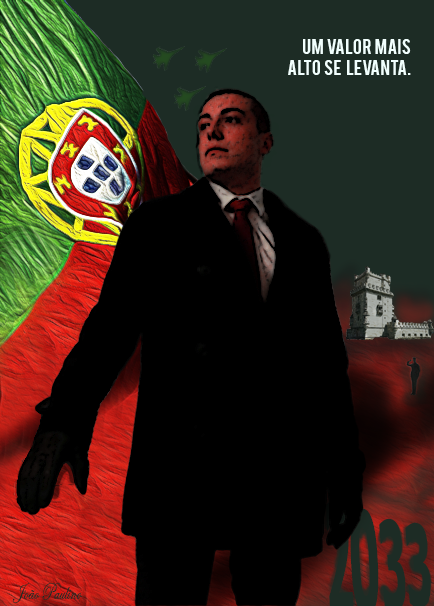
<style>
.page{position:relative;width:434px;height:606px;background:#000000}
.page>*{position:absolute;margin:0}
.t1{font:17.1px "Bebas";color:#f1fffd}
.t2{font:111.6px "Tahoma-Bold";color:#1d2c25;scale:0.37 1}
.t3{font:23.9px "EdwardianScriptITC";color:#1d2c25;scale:0.68 1}
</style>
<div class="page">
<p class="t1" style="left:288px;top:39px;width:123px;height:36px;text-align:right">Um  valor  mais  <br>alto  se   levanta.</p>
<p class="t2" style="left:405px;top:522px;width:26px;height:86px;rotate:-1deg">3</p>
<p class="t3" style="left:12px;top:583px;width:71px;height:20px">João Paulino</p>
</div>
